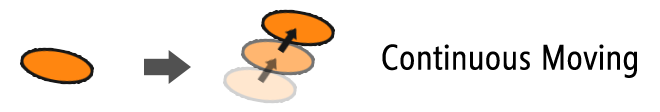
<style>
.page{position:relative;width:660px;height:112px;background:#ffffff}
.page>*{position:absolute;margin:0}
.t1{font:35px "SegoeCondensed";color:#000000;font-weight:bold}
</style>
<div class="page">
<p class="t1" style="left:382px;top:44px;width:255px;height:34px">Continuous Moving</p>
</div>
